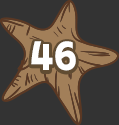
<style>
.page{position:relative;width:119px;height:125px;background:#333333}
.page>*{position:absolute;margin:0}
.t1{font:60px "Shorooq_N1";color:#ffffff}
</style>
<div class="page">
<p class="t1" style="left:31px;top:41px;width:45px;height:30px">46</p>
</div>
